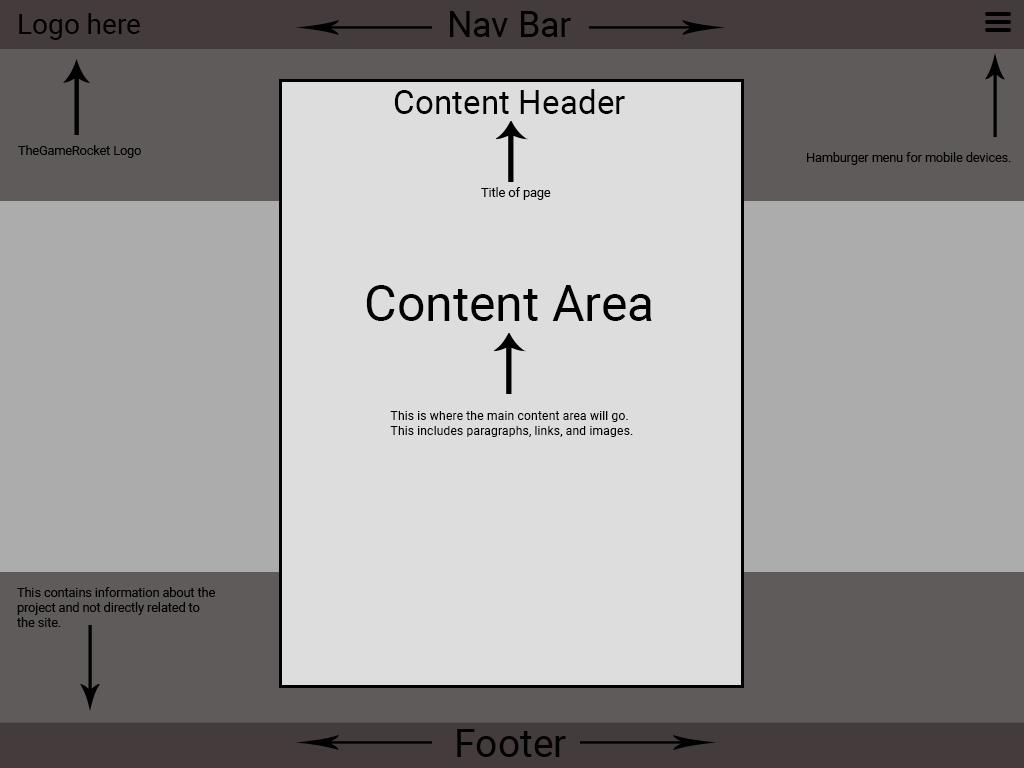
<style>
.page{position:relative;width:1024px;height:768px;background:#dddddd}
.page>*{position:absolute;margin:0}
.t1{font:28px "Roboto-Regular";color:#000000}
.t2{font:35.7px "Roboto-Regular";color:#000000}
.t3{font:33.3px "Roboto-Regular";color:#000000}
.t4{font:12.5px "Roboto-Regular";color:#000000}
.t5{font:50px "Roboto-Regular";color:#000000}
.t6{font:12.4px "Roboto-Regular";color:#000000}
.t7{font:39.1px "Roboto-Regular";color:#000000}
</style>
<div class="page">
<p class="t1" style="left:19px;top:13px;width:121px;height:27px">Logo here</p>
<p class="t2" style="left:450px;top:11px;width:121px;height:26px">Nav Bar</p>
<p class="t3" style="left:394px;top:89px;width:231px;height:25px">Content Header</p>
<p class="t4" style="left:18px;top:145px;width:123px;height:13px">TheGameRocket Logo</p>
<p class="t4" style="left:807px;top:152px;width:204px;height:13px">Hamburger menu for mobile devices.</p>
<p class="t4" style="left:481px;top:187px;width:70px;height:13px">Title of page</p>
<p class="t5" style="left:366px;top:285px;width:286px;height:36px">Content Area</p>
<p class="t6" style="left:390px;top:411px;width:243px;height:26px">This is where the main content area will go. <br>This includes paragraphs, links, and images.</p>
<p class="t4" style="left:17px;top:587px;width:198px;height:40px">This contains information about the project and not directly related to the site.</p>
<p class="t7" style="left:457px;top:729px;width:109px;height:28px">Footer</p>
</div>
